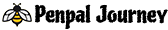
<style>
.page{position:relative;width:168px;height:30px;background:#ffffff}
.page>*{position:absolute;margin:0}
.t1{font:22px "Piedra-Regular";color:#000000}
</style>
<div class="page">
<p class="t1" style="left:34px;top:4px;width:134px;height:25px">Penpal Journey</p>
</div>
